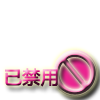
<style>
.page{position:relative;width:100px;height:100px;background:#ffffff}
.page>*{position:absolute;margin:0}
.t1{font:18px "MicrosoftYaHei";font-weight:bold}
</style>
<div class="page">
<p class="t1" style="left:5px;top:68px;width:53px;height:19px">已禁用</p>
</div>
